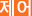
<style>
.page{position:relative;width:32px;height:16px;background:#f86f1e}
.page>*{position:absolute;margin:0}
.t1{font:12px "MalgunGothic";color:#ffffff;font-weight:bold}
</style>
<div class="page">
<p class="t1" style="left:0px;top:0px;width:31px;height:17px">제어</p>
</div>
